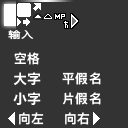
<style>
.page{position:relative;width:128px;height:128px;background:#333333}
.page>*{position:absolute;margin:0}
.t1{font:9.5px "DFKingGothicSC14-Semibold";letter-spacing:0.065em;color:#ffffff;scale:1.33 1}
.t2{font:12.7px "DFKingGothicSC14-Semibold";letter-spacing:0.065em;color:#ffffff}
</style>
<div class="page">
<p class="t1" style="left:8px;top:30px;width:26px;height:10px">输入</p>
<p class="t2" style="left:14px;top:52px;width:26px;height:13px">空格</p>
<p class="t2" style="left:62px;top:72px;width:39px;height:13px">平假名</p>
<p class="t2" style="left:62px;top:92px;width:39px;height:13px">片假名</p>
<p class="t2" style="left:19px;top:112px;width:25px;height:13px">向左</p>
<p class="t2" style="left:65px;top:112px;width:25px;height:13px">向右</p>
</div>
